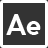
<style>
.page{position:relative;width:48px;height:48px;background:#333333}
.page>*{position:absolute;margin:0}
.t1{font:28px "CocoGothic-Bold";color:#ffffff}
</style>
<div class="page">
<p class="t1" style="left:6px;top:14px;width:35px;height:21px">Ae</p>
</div>
